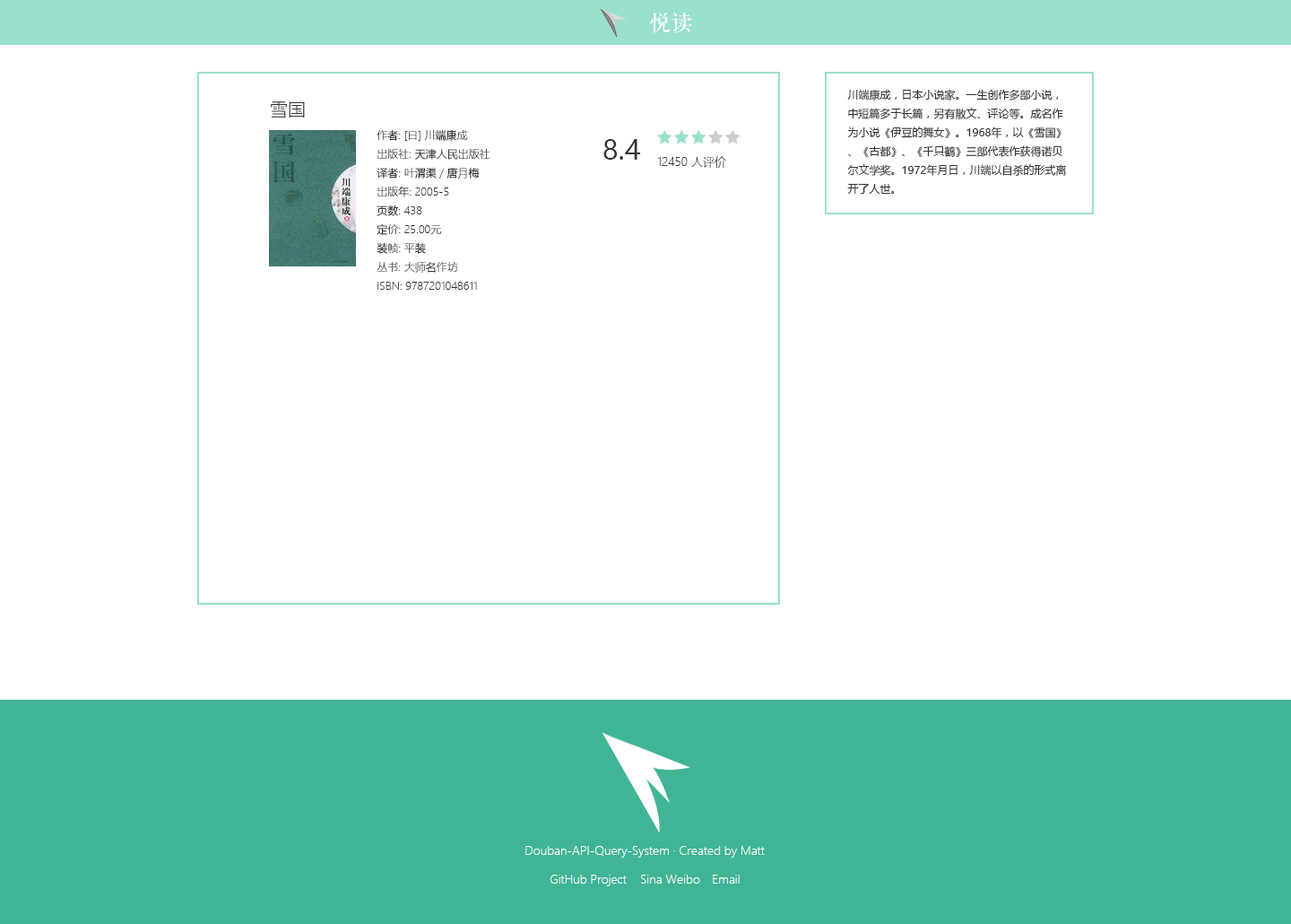
<style>
.page{position:relative;width:1291px;height:924px;background:#ffffff}
.page>*{position:absolute;margin:0}
.t1{font:21.5px "FZQKBYSJW--GB1-0";color:#ffffff}
.t2{font:10.8px "MicrosoftYaHeiUI";color:#333333}
.t3{font:17.9px "MicrosoftYaHeiLight";color:#333333}
.t4{font:10.8px "MicrosoftYaHeiLight";color:#333333}
.t5{font:26.9px "MicrosoftYaHeiUI";color:#333333}
.t6{font:11.7px "MicrosoftYaHeiLight";color:#333333}
.t7{font:11.7px "MicrosoftYaHeiLight";color:#ffffff}
</style>
<div class="page">
<p class="t1" style="left:650px;top:13px;width:42px;height:20px">悦读</p>
<p class="t2" style="left:847px;top:89px;width:220px;height:105px">川端康成，日本小说家。一生创作多部小说，中短篇多于长篇，另有散文、评论等。成名作为小说《伊豆的舞女》。1968年，以《雪国》、《古都》、《千只鹤》三部代表作获得诺贝尔文学奖。1972年月日，川端以自杀的形式离开了人世。</p>
<p class="t3" style="left:271px;top:101px;width:34px;height:17px">雪国</p>
<p class="t4" style="left:377px;top:129px;width:113px;height:161px">作者: [日] 川端康成 <br>出版社: 天津人民出版社<br>译者: 叶渭渠 / 唐月梅 <br>出版年: 2005-5<br>页数: 438<br>定价: 25.00元<br>装帧: 平装<br>丛书: 大师名作坊<br>ISBN: 9787201048611</p>
<p class="t5" style="left:603px;top:139px;width:37px;height:21px">8.4</p>
<p class="t6" style="left:657px;top:156px;width:69px;height:12px">12450 人评价</p>
<p class="t7" style="left:525px;top:846px;width:240px;height:11px">Douban-API-Query-System · Created by Matt</p>
<p class="t7" style="left:550px;top:874px;width:77px;height:12px">GitHub Project</p>
<p class="t7" style="left:641px;top:874px;width:59px;height:9px">Sina Weibo</p>
<p class="t7" style="left:713px;top:874px;width:27px;height:9px">Email</p>
</div>
